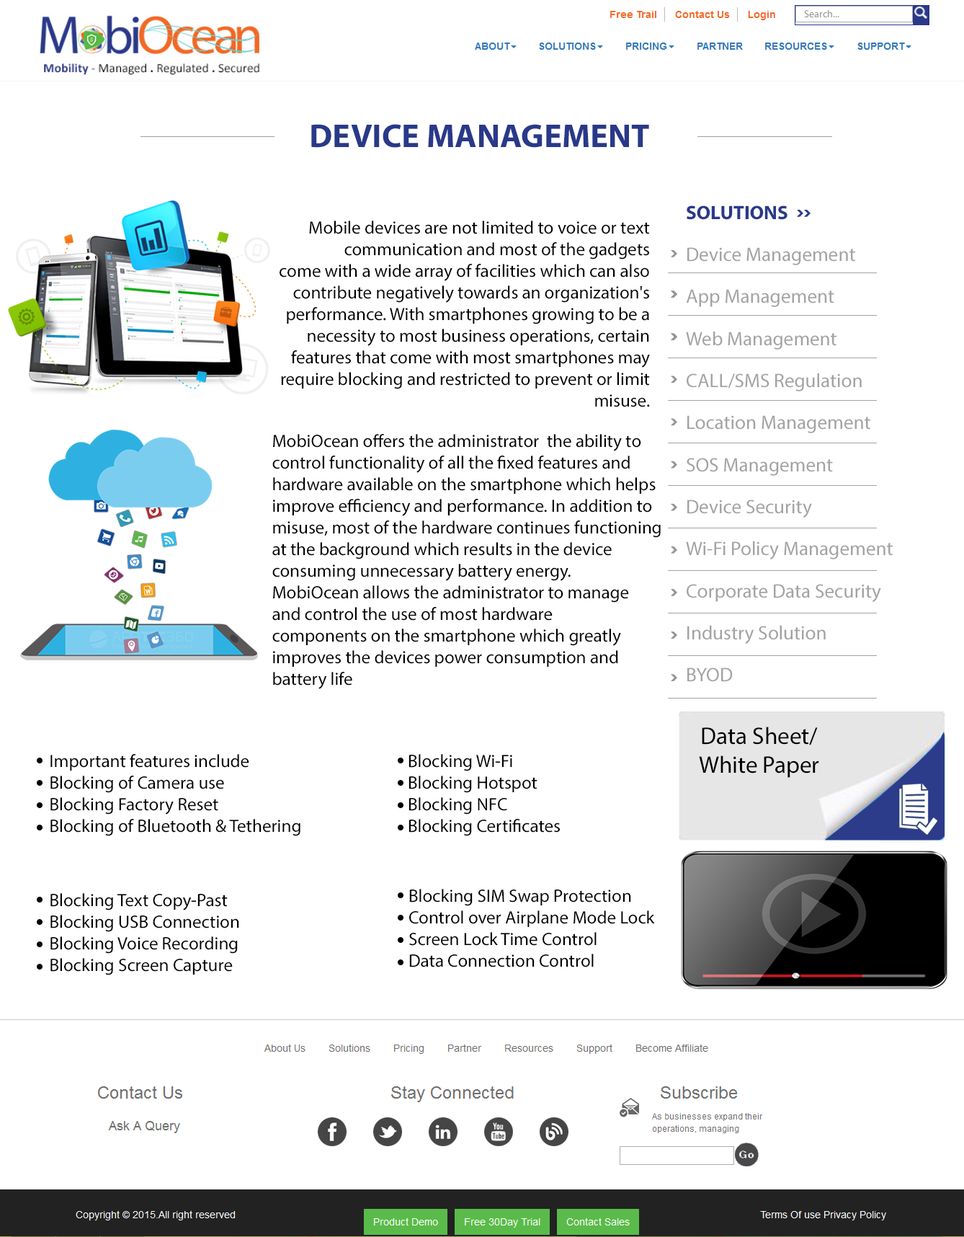
<style>
.page{position:relative;width:964px;height:1237px;background:#ffffff}
.page>*{position:absolute;margin:0}
.t1{font:33.1px "MyriadPro-Bold";color:#293989}
.t2{font:19.6px/42px "MyriadPro-Regular";color:#a4a3a3}
.t3{font:19.6px/42px "MyriadPro-Bold";color:#293989}
.t4{font:18px "MyriadPro-Regular";color:#000000}
.t5{font:23.9px "MyriadPro-Regular";color:#000000}
</style>
<div class="page">
<p class="t1" style="left:311px;top:124px;width:338px;height:24px">DEVICE MANAGEMENT</p>
<p class="t2" style="left:686px;top:205px;width:207px;height:477px"><span class="t3">SOLUTIONS<br></span>Device Management<br>App Management<br>Web Management<br>CALL/SMS Regulation<br>Location Management<br>SOS Management<br>Device Security<br>Wi-Fi Policy Management<br>Corporate Data Security<br>Industry Solution<br>BYOD</p>
<p class="t4" style="left:280px;top:221px;width:370px;height:186px;text-align:right">Mobile devices are not limited to voice or text<br>communication and most of the gadgets<br>come with a wide array of facilities which can also<br>contribute negatively towards an organization's<br>performance. With smartphones growing to be a<br>necessity to most business operations, certain<br>features that come with most smartphones may<br>require blocking and restricted to prevent or limit<br>misuse.</p>
<p class="t4" style="left:272px;top:434px;width:389px;height:255px">MobiOcean offers the administrator  the ability to<br>control functionality of all the fixed features and<br>hardware available on the smartphone which helps<br>improve efficiency and performance. In addition to<br>misuse, most of the hardware continues functioning<br>at the background which results in the device<br>consuming unnecessary battery energy.<br>MobiOcean allows the administrator to manage<br>and control the use of most hardware<br>components on the smartphone which greatly<br>improves the devices power consumption and<br>battery life</p>
<p class="t5" style="left:699px;top:726px;width:120px;height:52px;text-align:center">Data Sheet/<br>White Paper</p>
<p class="t4" style="left:50px;top:754px;width:251px;height:82px">Important features include<br>    Blocking of Camera use<br>    Blocking Factory Reset<br>    Blocking of Bluetooth &amp; Tethering</p>
<p class="t4" style="left:409px;top:754px;width:151px;height:82px">Blocking Wi-Fi<br>Blocking Hotspot<br>Blocking NFC<br>Blocking Certificates</p>
<p class="t4" style="left:50px;top:893px;width:189px;height:82px">Blocking Text Copy-Past<br>Blocking USB Connection<br>Blocking Voice Recording<br>Blocking Screen Capture</p>
<p class="t4" style="left:409px;top:889px;width:246px;height:78px">Blocking SIM Swap Protection<br>Control over Airplane Mode Lock<br>Screen Lock Time Control<br>Data Connection Control</p>
</div>
